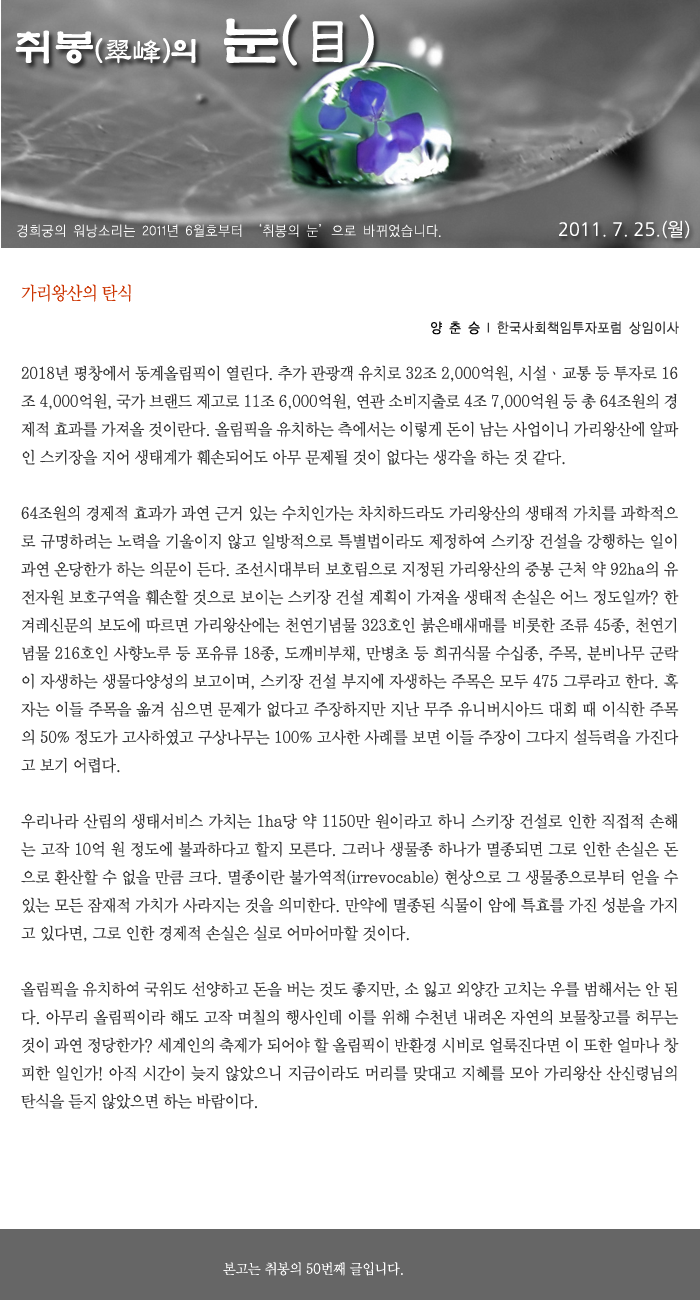
<style>
.page{position:relative;width:700px;height:1300px;background:#ffffff}
.page>*{position:absolute;margin:0}
.t1{font:28.6px "YetR-HM";color:#ffffff}
.t2{font:39.6px "YetR-HM";color:#ffffff}
.t3{font:57.3px "YetR-HM";color:#ffffff}
.t4{font:18px "NanumGothic";color:#ffffff}
.t5{font:14px "YDIYGO110-KSCpc-EUC-H";color:#ffffff;scale:0.9 1}
.t6{font:18px "YDIWebBatan";color:#cc3300;scale:0.9 1}
.t7{font:14px "YDIYGO120-KSCpc-EUC-H";color:#333333;scale:0.9 1}
.t8{font:14px "YDIYGO120-KSCpc-EUC-H";color:#000000;scale:0.9 1}
.t9{font:16px "YDIWebBatan";color:#333333;scale:0.95 1}
.t10{font:14px "YDIWebBatan";color:#ffffff;scale:0.95 1}
</style>
<div class="page">
<p class="t1" style="left:15px;top:14px;width:359px;height:52px"><span class="t2">취봉</span>(翠峰)의  <span class="t3">눈(目)</span></p>
<p class="t4" style="left:559px;top:220px;width:131px;height:19px">2011. 7. 25.(월)</p>
<p class="t5" style="left:17px;top:223px;width:424px;height:15px">경희궁의 워낭소리는 2011년 6월호부터 ‘취봉의 눈’으로 바뀌었습니다.</p>
<p class="t6" style="left:21px;top:284px;width:110px;height:18px">가리왕산의 탄식</p>
<p class="t7" style="left:431px;top:321px;width:248px;height:14px"><span class="t8">양 춘 승 </span>l 한국사회책임투자포럼 상임이사</p>
<p class="t9" style="left:21px;top:365px;width:658px;height:745px;text-align:justify">2018년 평창에서 동계올림픽이 열린다. 추가 관광객 유치로 32조 2,000억원, 시설ㆍ교통 등 투자로 16조 4,000억원, 국가 브랜드 제고로 11조 6,000억원, 연관 소비지출로 4조 7,000억원 등 총 64조원의 경제적 효과를 가져올 것이란다. 올림픽을 유치하는 측에서는 이렇게 돈이 남는 사업이니 가리왕산에 알파인 스키장을 지어 생태계가 훼손되어도 아무 문제될 것이 없다는 생각을 하는 것 같다.<br><br>64조원의 경제적 효과가 과연 근거 있는 수치인가는 차치하드라도 가리왕산의 생태적 가치를 과학적으로 규명하려는 노력을 기울이지 않고 일방적으로 특별법이라도 제정하여 스키장 건설을 강행하는 일이 과연 온당한가 하는 의문이 든다. 조선시대부터 보호림으로 지정된 가리왕산의 중봉 근처 약 92ha의 유전자원 보호구역을 훼손할 것으로 보이는 스키장 건설 계획이 가져올 생태적 손실은 어느 정도일까? 한겨레신문의 보도에 따르면 가리왕산에는 천연기념물 323호인 붉은배새매를 비롯한 조류 45종, 천연기념물 216호인 사향노루 등 포유류 18종, 도깨비부채, 만병초 등 희귀식물 수십종, 주목, 분비나무 군락이 자생하는 생물다양성의 보고이며, 스키장 건설 부지에 자생하는 주목은 모두 475 그루라고 한다. 혹자는 이들 주목을 옮겨 심으면 문제가 없다고 주장하지만 지난 무주 유니버시아드 대회 때 이식한 주목의 50% 정도가 고사하였고 구상나무는 100% 고사한 사례를 보면 이들 주장이 그다지 설득력을 가진다고 보기 어렵다. <br><br>우리나라 산림의 생태서비스 가치는 1ha당 약 1150만 원이라고 하니 스키장 건설로 인한 직접적 손해는 고작 10억 원 정도에 불과하다고 할지 모른다. 그러나 생물종 하나가 멸종되면 그로 인한 손실은 돈으로 환산할 수 없을 만큼 크다. 멸종이란 불가역적(irrevocable) 현상으로 그 생물종으로부터 얻을 수 있는 모든 잠재적 가치가 사라지는 것을 의미한다. 만약에 멸종된 식물이 암에 특효를 가진 성분을 가지고 있다면, 그로 인한 경제적 손실은 실로 어마어마할 것이다.<br><br>올림픽을 유치하여 국위도 선양하고 돈을 버는 것도 좋지만, 소 잃고 외양간 고치는 우를 범해서는 안 된다. 아무리 올림픽이라 해도 고작 며칠의 행사인데 이를 위해 수천년 내려온 자연의 보물창고를 허무는 것이 과연 정당한가? 세계인의 축제가 되어야 할 올림픽이 반환경 시비로 얼룩진다면 이 또한 얼마나 창피한 일인가! 아직 시간이 늦지 않았으니 지금이라도 머리를 맞대고 지혜를 모아 가리왕산 산신령님의 탄식을 듣지 않았으면 하는 바람이다.</p>
<p class="t10" style="left:223px;top:1262px;width:180px;height:14px">본고는 취봉의 50번째 글입니다.</p>
</div>
